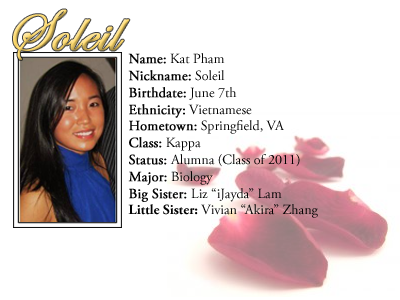
<style>
.page{position:relative;width:400px;height:300px;background:#ffffff}
.page>*{position:absolute;margin:0}
.t1{font:60px "EdwardianScriptITC";font-weight:bold}
.t2{font:14px "AGaramondPro-Regular";color:#000000}
.t3{font:14px "AGaramondPro-Regular";color:#000000;font-weight:bold}
.t4{font:14px "AGaramondPro-Bold";color:#000000}
</style>
<div class="page">
<p class="t1" style="left:13px;top:9px;width:117px;height:51px">Soleil</p>
<p class="t2" style="left:128px;top:53px;width:190px;height:165px"><span class="t3">Name:</span> Kat Pham<br><span class="t3">Nickname:</span> Soleil<br><span class="t3">Birthdate:</span> June 7th<br><span class="t3">Ethnicity:</span> Vietnamese<br><span class="t3">Hometown:</span> Springfield, VA<br><span class="t3">Class:</span> Kappa<br><span class="t3">Status: </span>Alumna (Class of 2011)<br><span class="t3">Major:</span> Biology<br><span class="t3">Big Sister: </span>Liz “iJayda” Lam<br><span class="t4">Little Sister: </span>Vivian “Akira” Zhang</p>
</div>
